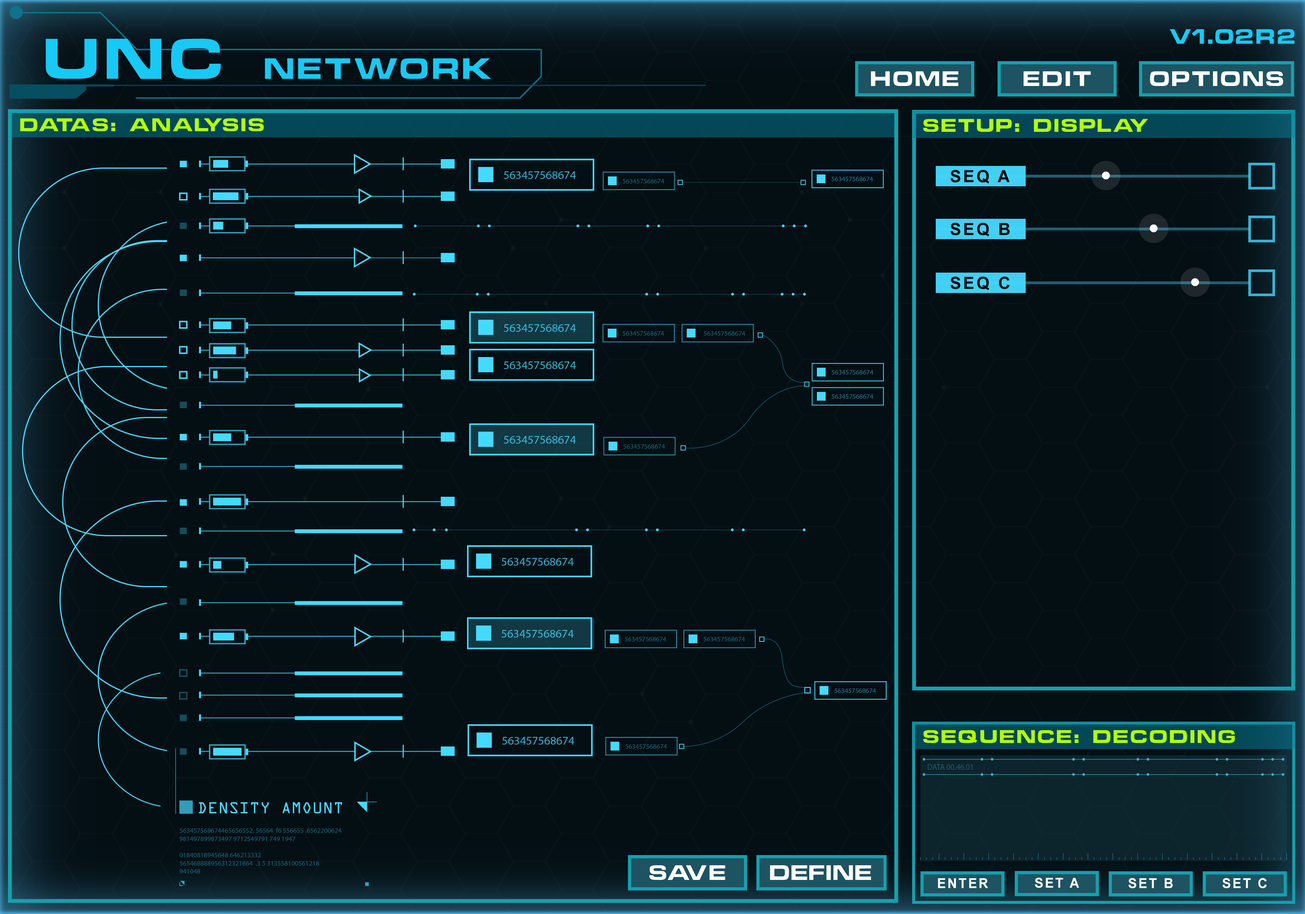
<style>
.page{position:relative;width:1305px;height:914px;background:#040f14}
.page>*{position:absolute;margin:0}
.t1{font:19.1px "ChinoCapsSSK";letter-spacing:0.12em;color:#17c9f5}
.t2{font:26.9px "ChinoCapsSSK";letter-spacing:0.12em;color:#17c9f5}
.t3{font:52.4px "ChinoCapsSSK";letter-spacing:0.12em;color:#17c9f5}
.t4{font:19.2px "ChinoCapsSSK";letter-spacing:0.12em;color:#ffffff}
.t5{font:16.8px "ChinoCapsSSK";letter-spacing:0.12em;color:#b4ff00}
.t6{font:16.8px "Arial-BoldMT";letter-spacing:0.12em;color:#000000}
.t7{font:19.2px "ChinoCapsSSK";letter-spacing:0.1em;color:#ffffff}
.t8{font:19.2px "ChinoCapsSSK";letter-spacing:0.06em;color:#ffffff}
.t9{font:13.6px "Arial-BoldMT";letter-spacing:0.12em;color:#ffffff}
</style>
<div class="page">
<p class="t1" style="left:1169px;top:29px;width:125px;height:15px">V1.02R2</p>
<p class="t2" style="left:46px;top:39px;width:445px;height:40px"><span class="t3">UNC </span>NETWORK</p>
<p class="t4" style="left:870px;top:71px;width:88px;height:15px">HOME</p>
<p class="t4" style="left:1023px;top:71px;width:68px;height:15px">EDIT</p>
<p class="t4" style="left:1149px;top:71px;width:134px;height:15px">OPTIONS</p>
<p class="t5" style="left:20px;top:118px;width:244px;height:13px">DATAS: ANALYSIS</p>
<p class="t5" style="left:923px;top:119px;width:225px;height:13px">SETUP: DISPLAY</p>
<p class="t6" style="left:950px;top:170px;width:59px;height:13px">SEQ A</p>
<p class="t6" style="left:950px;top:223px;width:59px;height:13px">SEQ B</p>
<p class="t6" style="left:950px;top:276px;width:59px;height:14px">SEQ C</p>
<p class="t5" style="left:923px;top:730px;width:311px;height:13px">SEQUENCE: DECODING</p>
<p class="t7" style="left:649px;top:865px;width:76px;height:15px">SAVE</p>
<p class="t8" style="left:770px;top:865px;width:101px;height:15px">DEFINE</p>
<p class="t9" style="left:938px;top:878px;width:50px;height:10px">ENTER</p>
<p class="t9" style="left:1034px;top:878px;width:45px;height:10px">SET A</p>
<p class="t9" style="left:1128px;top:878px;width:44px;height:10px">SET B</p>
<p class="t9" style="left:1222px;top:878px;width:44px;height:10px">SET C</p>
</div>
